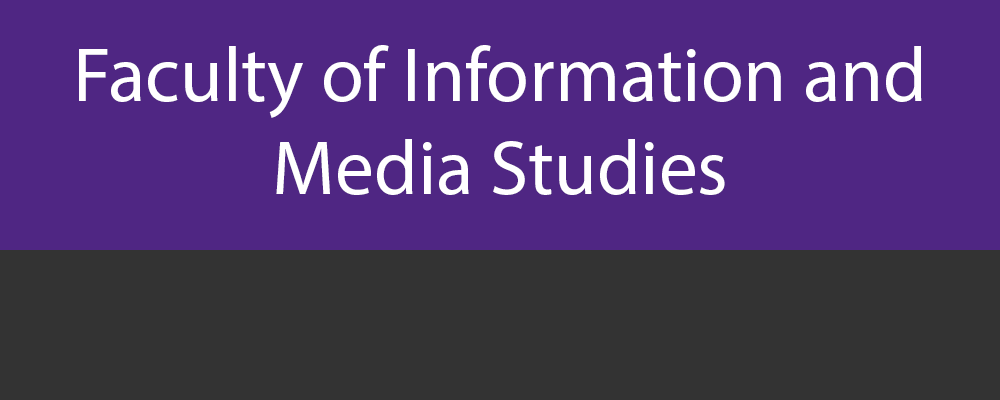
<style>
.page{position:relative;width:1000px;height:400px;background:#4f2683}
.page>*{position:absolute;margin:0}
.t1{font:77.7px "MyriadPro-Regular";color:#ffffff}
</style>
<div class="page">
<p class="t1" style="left:79px;top:45px;width:843px;height:150px;text-align:center">Faculty of Information and Media Studies</p>
</div>
